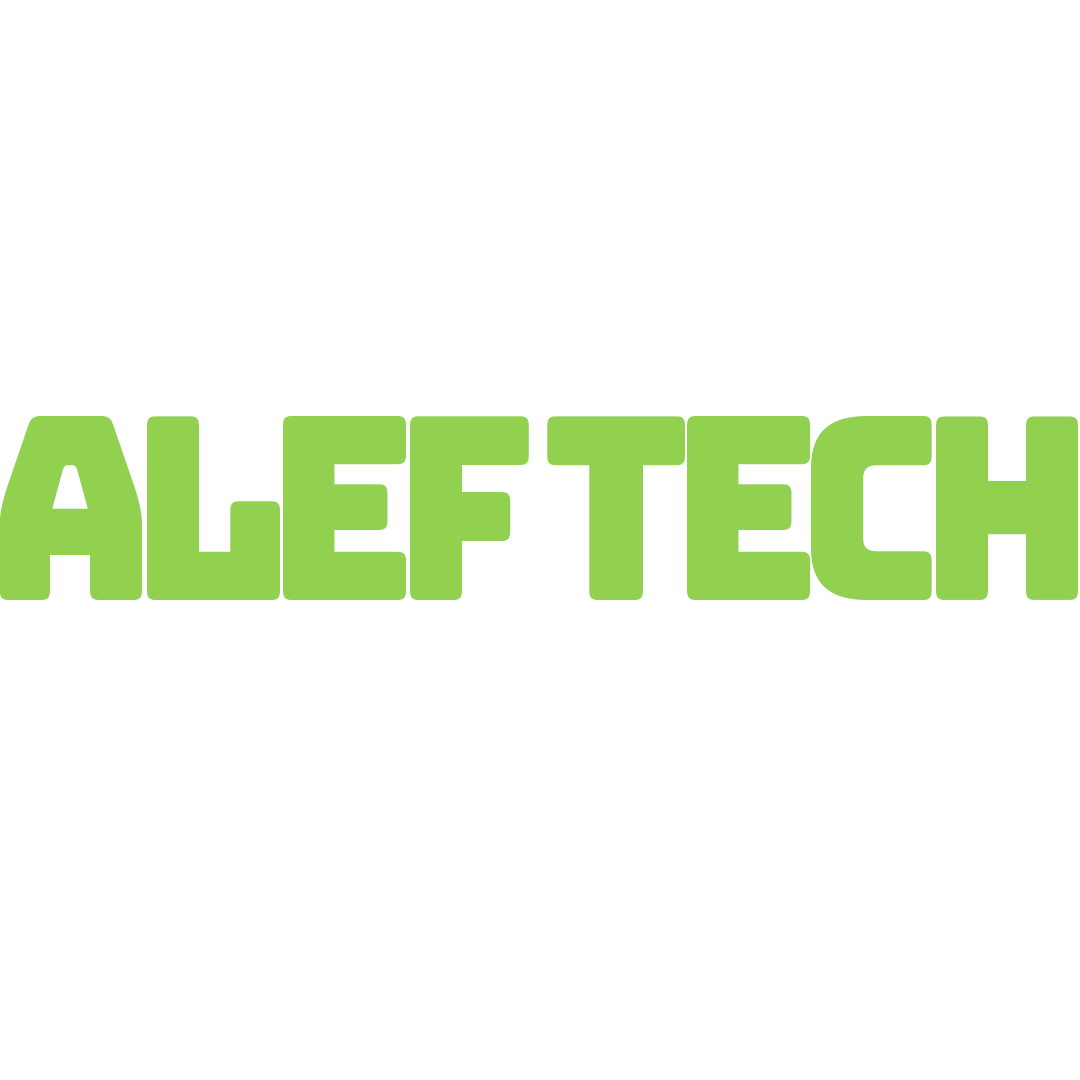
<style>
.page{position:relative;width:1080px;height:1080px;background:#ffffff}
.page>*{position:absolute;margin:0}
.t1{font:255.1px "Bungee-Regular";letter-spacing:-0.1em;color:#92d050;scale:0.9 1}
</style>
<div class="page">
<p class="t1" style="left:0px;top:416px;width:1078px;height:185px">Alef Tech</p>
</div>
